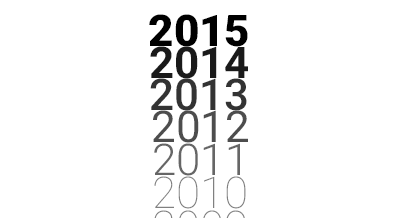
<style>
.page{position:relative;width:402px;height:218px;background:#ffffff}
.page>*{position:absolute;margin:0}
.t1{font:43.9px "Roboto-Black";color:#000000}
.t2{font:43.9px "Roboto-Bold";color:#1a1a1a}
.t3{font:43.9px "Roboto-Medium";color:#333333}
.t4{font:43.9px "Roboto-Regular";color:#4d4d4d}
.t5{font:43.9px "Roboto-Light";color:#666666}
.t6{font:43.9px "Roboto-Thin";color:#808080}
</style>
<div class="page">
<p class="t1" style="left:149px;top:14px;width:99px;height:33px">2015</p>
<p class="t2" style="left:150px;top:46px;width:98px;height:33px">2014</p>
<p class="t3" style="left:150px;top:78px;width:97px;height:33px">2013</p>
<p class="t4" style="left:153px;top:110px;width:95px;height:33px">2012</p>
<p class="t5" style="left:154px;top:143px;width:86px;height:33px">2011</p>
<p class="t6" style="left:154px;top:176px;width:92px;height:33px">2010</p>
</div>
